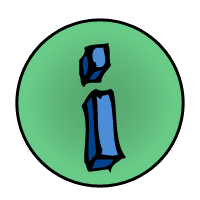
<style>
.page{position:relative;width:200px;height:200px;background:#ffffff}
.page>*{position:absolute;margin:0}
.t1{font:150.8px "3dumb";color:#000000}
</style>
<div class="page">
<p class="t1" style="left:79px;top:43px;width:47px;height:130px">i</p>
</div>
